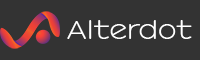
<style>
.page{position:relative;width:200px;height:60px;background:#333333}
.page>*{position:absolute;margin:0}
.t1{font:25px "G8321-Regular";color:#ffffff}
</style>
<div class="page">
<p class="t1" style="left:67px;top:20px;width:125px;height:19px">Alterdot</p>
</div>
